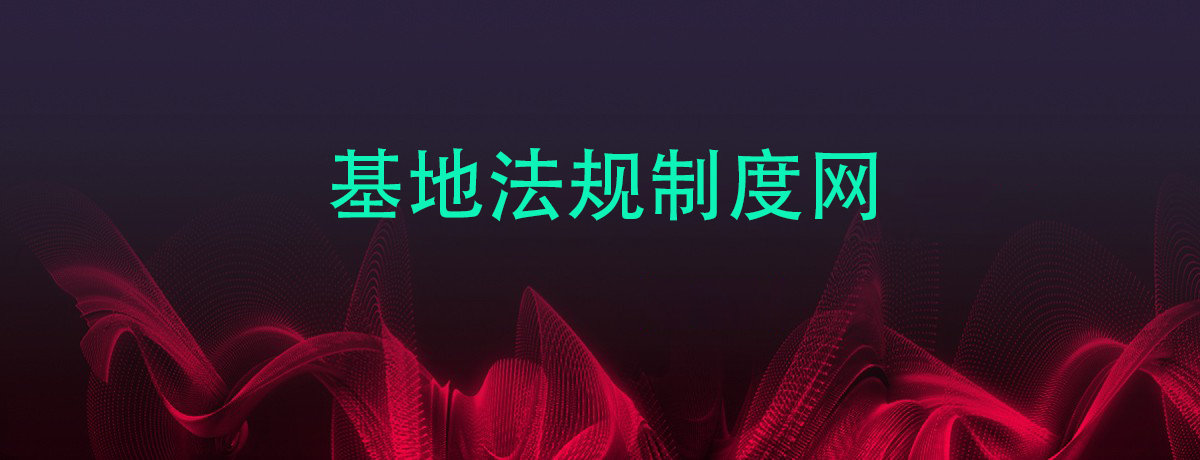
<style>
.page{position:relative;width:1200px;height:460px}
.page>*{position:absolute;margin:0}
.t1{font:80px "AdobeHeitiStd-Regular";color:#0ef3b8}
</style>
<div class="page">
<p class="t1" style="left:329px;top:148px;width:548px;height:74px">基地法规制度网</p>
</div>
